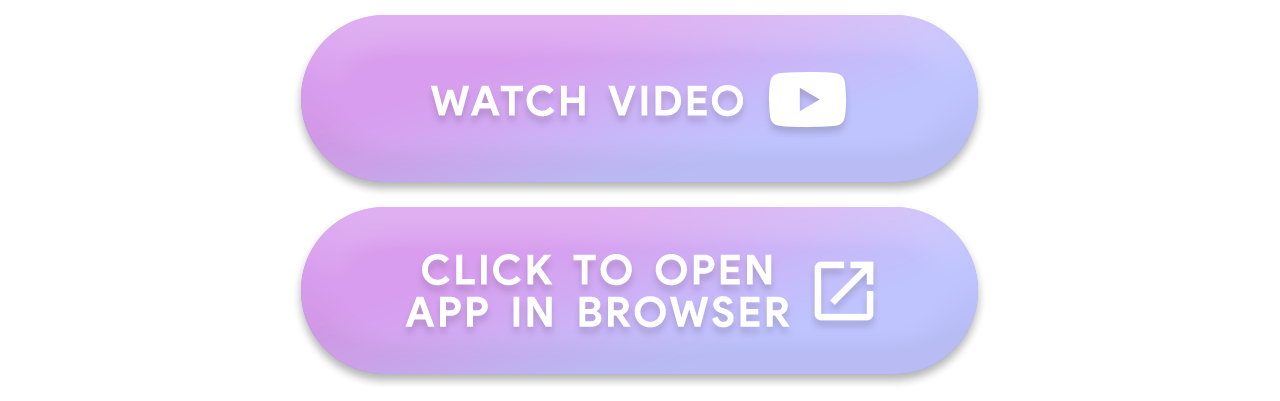
<style>
.page{position:relative;width:1280px;height:401px;background:#ffffff}
.page>*{position:absolute;margin:0}
.t1{font:41.4px "ProductSans-Bold";letter-spacing:0.06em;color:#ffffff;text-transform:uppercase}
.t2{font:41.4px "ProductSans-Bold";letter-spacing:0.25em;color:#ffffff;text-transform:uppercase}
.t3{font:41.4px/42.2px "ProductSans-Bold";letter-spacing:0.06em;color:#ffffff;text-transform:uppercase}
.t4{font:41.4px/42.2px "ProductSans-Bold";letter-spacing:0.25em;color:#ffffff;text-transform:uppercase}
</style>
<div class="page">
<p class="t1" style="left:430px;top:85px;width:313px;height:32px">watc<span class="t2">h</span> video</p>
<p class="t3" style="left:405px;top:254px;width:385px;height:74px;text-align:center">clic<span class="t4">k</span> t<span class="t4">o</span> open<br>ap<span class="t4">p</span> i<span class="t4">n</span> browser</p>
</div>
